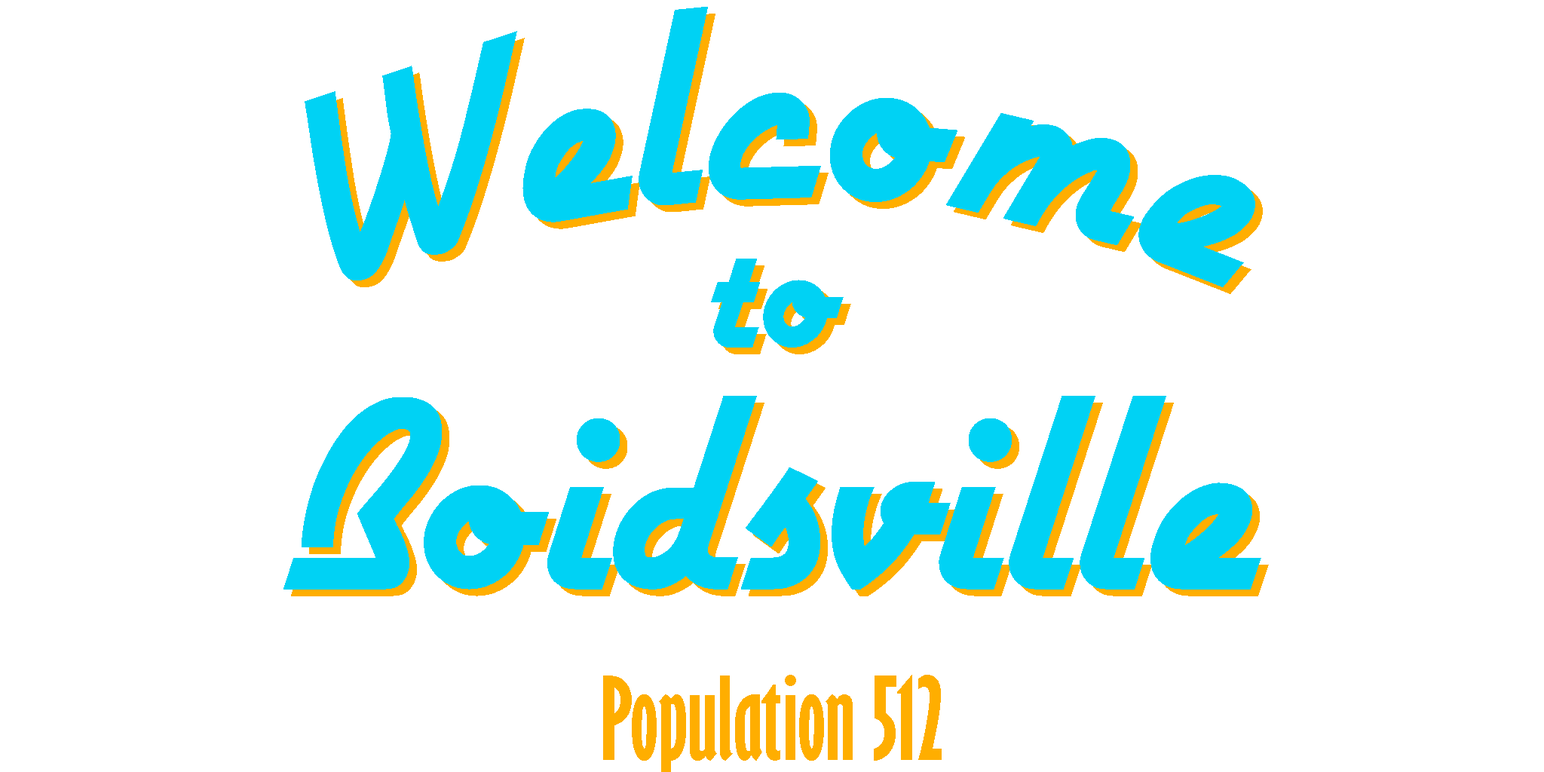
<style>
.page{position:relative;width:1544px;height:772px;background:#ffffff}
.page>*{position:absolute;margin:0}
.t1{font:314px "AirstreamNF";color:#00d2f4}
.t2{font:202.2px "AirstreamNF";color:#00d2f4}
.t3{font:106.3px "GillSansMT-ExtraCondensedBold";color:#ffae00}
</style>
<div class="page">
<p class="t1" style="left:305px;top:7px;width:950px;height:280px">Welcome</p>
<p class="t2" style="left:711px;top:259px;width:133px;height:89px">to</p>
<p class="t1" style="left:284px;top:396px;width:978px;height:194px">Boidsville</p>
<p class="t3" style="left:603px;top:675px;width:339px;height:97px">Population 512</p>
</div>
